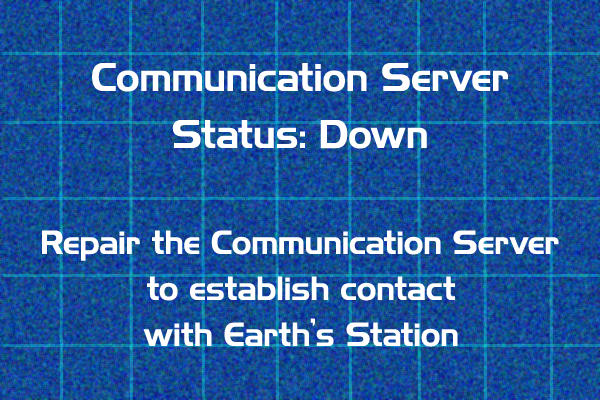
<style>
.page{position:relative;width:600px;height:400px}
.page>*{position:absolute;margin:0}
.t1{font:36px "HighlandGothicFLF";letter-spacing:0.005em;color:#ffffff}
.t2{font:30px "HighlandGothicFLF";letter-spacing:0.005em;color:#ffffff}
</style>
<div class="page">
<p class="t1" style="left:92px;top:63px;width:416px;height:29px">Communication Server</p>
<p class="t1" style="left:172px;top:120px;width:255px;height:29px">Status: Down</p>
<p class="t2" style="left:42px;top:230px;width:517px;height:31px">Repair the Communication Server</p>
<p class="t2" style="left:147px;top:276px;width:308px;height:25px">to establish contact</p>
<p class="t2" style="left:143px;top:318px;width:315px;height:29px">with Earth’s Station</p>
</div>
